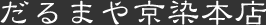
<style>
.page{position:relative;width:266px;height:25px;background:#333333}
.page>*{position:absolute;margin:0}
.t1{font:34px "DFLeiSho-SB-MP-RKSJ-H";color:#ffffff}
</style>
<div class="page">
<p class="t1" style="left:0px;top:0px;width:266px;height:25px">だるまや京染本店</p>
</div>
